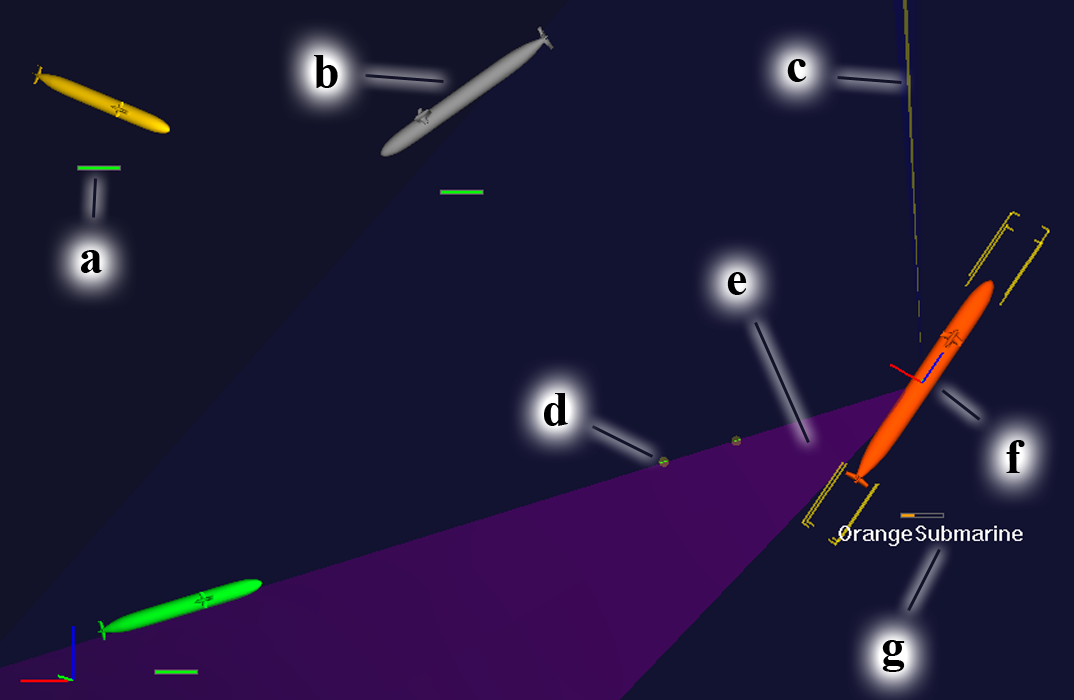
<style>
.page{position:relative;width:1074px;height:700px;background:#121231}
.page>*{position:absolute;margin:0}
.t1{font:48px "TimesNewRomanPS-BoldMT";color:#000000}
</style>
<div class="page">
<p class="t1" style="left:314px;top:55px;width:24px;height:33px">b</p>
<p class="t1" style="left:787px;top:59px;width:20px;height:23px">c</p>
<p class="t1" style="left:81px;top:250px;width:21px;height:23px">a</p>
<p class="t1" style="left:727px;top:272px;width:20px;height:23px">e</p>
<p class="t1" style="left:544px;top:393px;width:24px;height:33px">d</p>
<p class="t1" style="left:1006px;top:440px;width:19px;height:33px">f</p>
<p class="t1" style="left:882px;top:640px;width:23px;height:32px">g</p>
</div>
